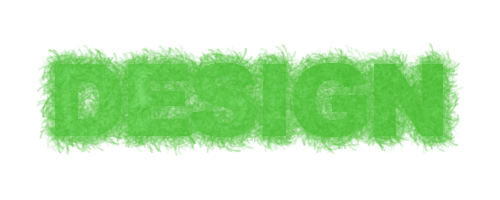
<style>
.page{position:relative;width:500px;height:200px;background:#ffffff}
.page>*{position:absolute;margin:0}
.t1{font:100px "Arial-Black";letter-spacing:-0.05em;color:#5cc647}
</style>
<div class="page">
<p class="t1" style="left:55px;top:63px;width:388px;height:74px">DESIGN</p>
</div>
